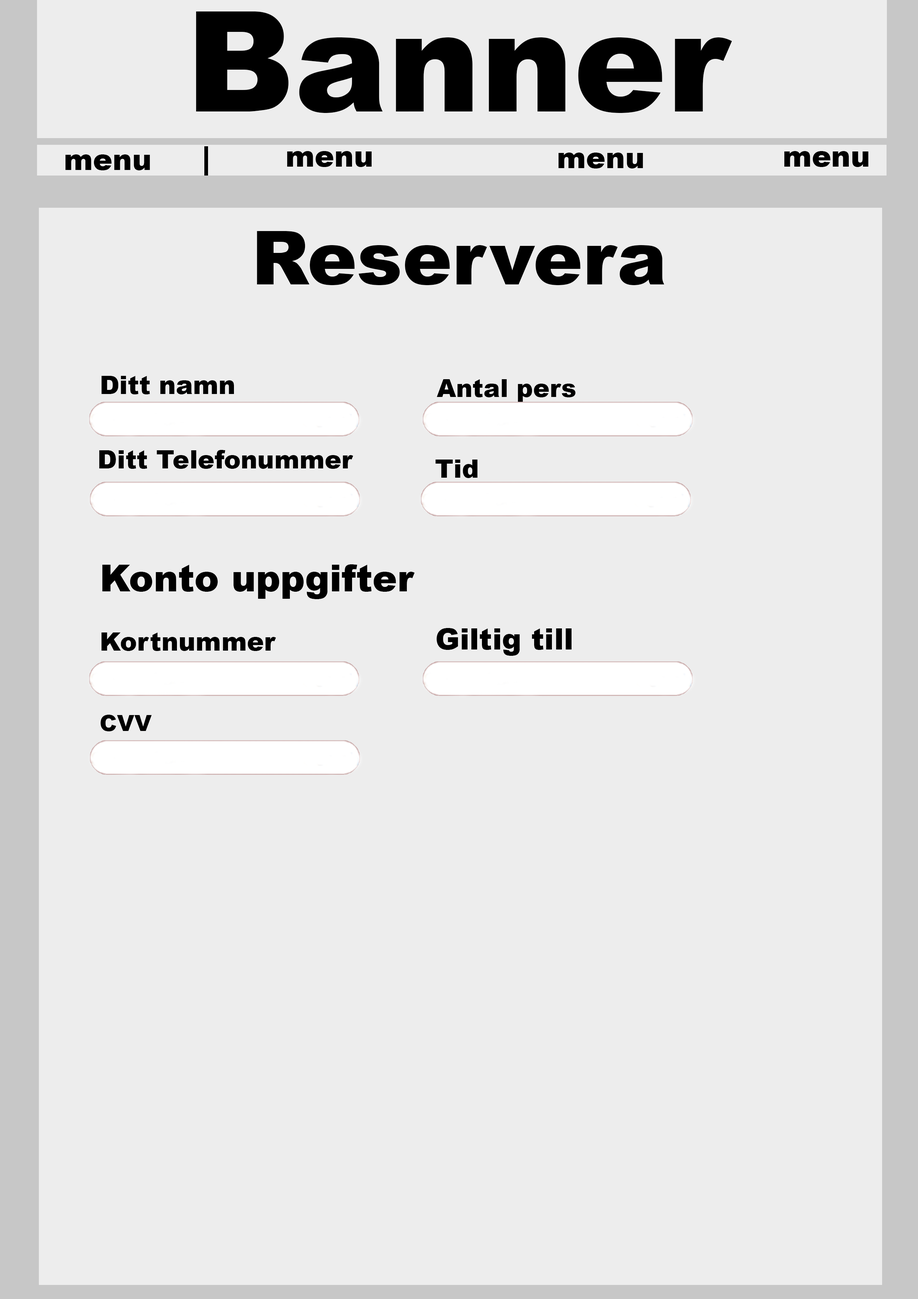
<style>
.page{position:relative;width:918px;height:1299px;background:#ededed}
.page>*{position:absolute;margin:0}
.t1{font:139.5px "Arial-Black";color:#000000}
.t2{font:29.3px "Arial-Black";color:#000000}
.t3{font:74.5px "Arial-Black";color:#000000}
.t4{font:25.5px "Arial-Black";color:#000000}
.t5{font:24.8px "Arial-Black";color:#000000}
.t6{font:25.1px "Arial-Black";color:#000000}
.t7{font:36.8px "Arial-Black";color:#000000}
.t8{font:25.7px "Arial-Black";color:#000000}
.t9{font:22.3px "Arial-Black";color:#000000}
</style>
<div class="page">
<p class="t1" style="left:196px;top:11px;width:536px;height:102px">Banner</p>
<p class="t2" style="left:65px;top:154px;width:85px;height:16px">menu</p>
<p class="t2" style="left:558px;top:153px;width:85px;height:15px">menu</p>
<p class="t2" style="left:784px;top:151px;width:85px;height:16px">menu</p>
<p class="t3" style="left:257px;top:231px;width:408px;height:54px">Reservera</p>
<p class="t4" style="left:101px;top:376px;width:133px;height:18px">Ditt namn</p>
<p class="t5" style="left:437px;top:379px;width:139px;height:23px">Antal pers</p>
<p class="t6" style="left:99px;top:450px;width:254px;height:19px">Ditt Telefonummer</p>
<p class="t4" style="left:435px;top:459px;width:43px;height:19px">Tid</p>
<p class="t7" style="left:102px;top:564px;width:313px;height:35px">Konto uppgifter</p>
<p class="t2" style="left:436px;top:628px;width:136px;height:28px">Giltig till</p>
<p class="t8" style="left:101px;top:632px;width:175px;height:19px">Kortnummer</p>
<p class="t9" style="left:100px;top:715px;width:52px;height:16px">CVV</p>
</div>
